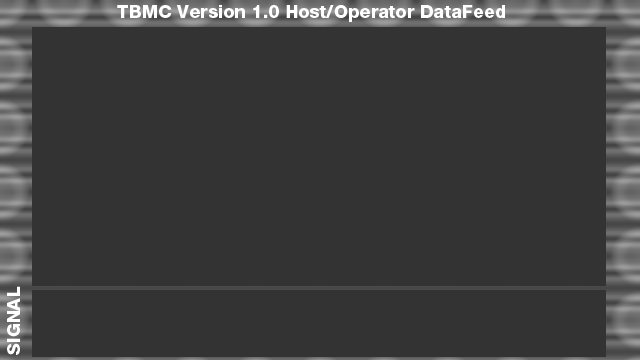
<style>
.page{position:relative;width:640px;height:360px;background:#333333}
.page>*{position:absolute;margin:0}
.t1{font:18px "HelveticaNeueLTPro-Hv";color:#ffffff}
</style>
<div class="page">
<p class="t1" style="left:117px;top:5px;width:388px;height:17px">TBMC Version 1.0 Host/Operator DataFeed</p>
<p class="t1" style="left:7px;top:286px;width:13px;height:69px;rotate:-90deg">SIGNAL</p>
</div>
